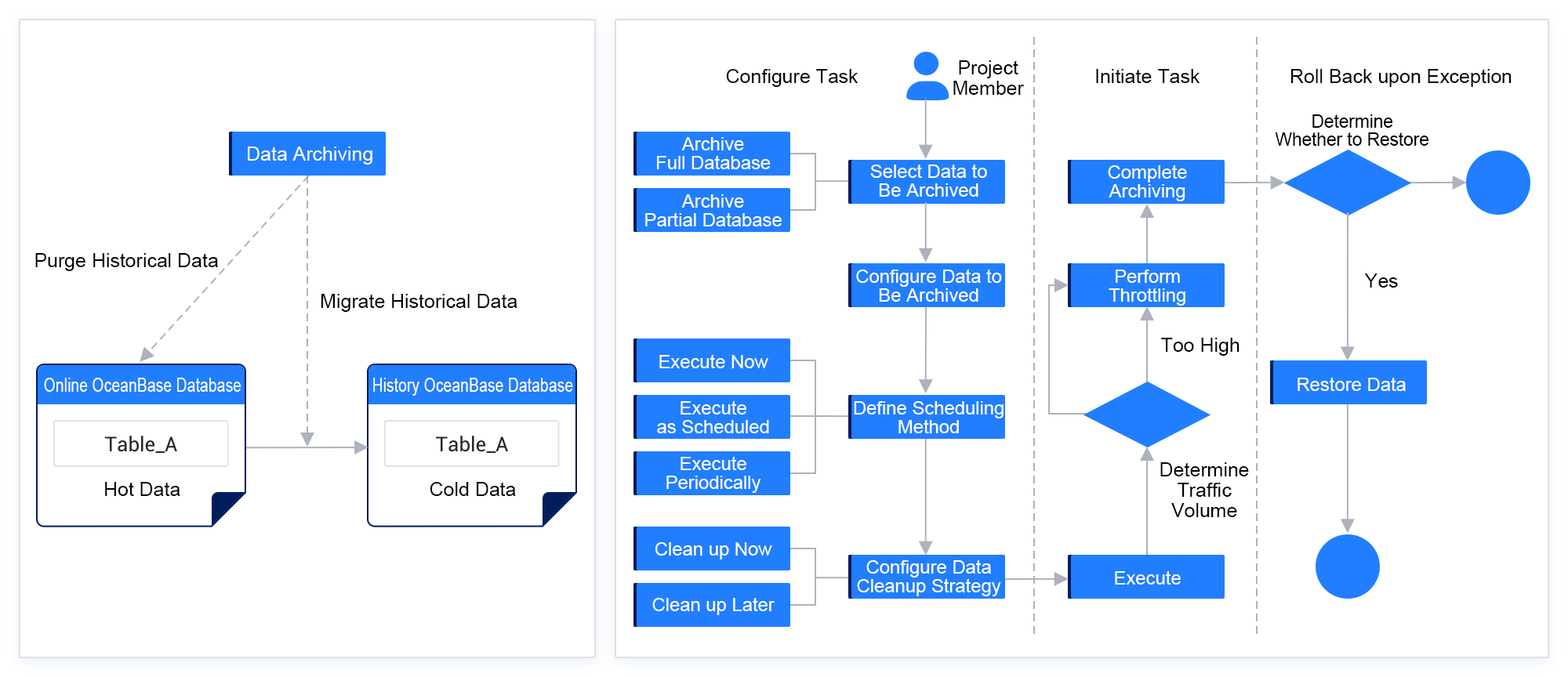
<style>
.page{position:relative;width:1568px;height:677px;background:#ffffff}
.page>*{position:absolute;margin:0}
.t1{font:19.5px/20.4px "ArialMT";color:#000000}
.t2{font:19.5px "ArialMT";color:#000000}
.t3{font:17.7px/18.5px "ArialMT";color:#000000}
.t4{font:18.7px/18.7px "ArialMT";color:#ffffff}
.t5{font:19.5px "ArialMT";color:#ffffff}
.t6{font:18.7px "ArialMT";color:#ffffff}
.t7{font:19.5px "ArialMT";color:#ffffff;scale:0.78 1}
</style>
<div class="page">
<p class="t1" style="left:953px;top:60px;width:71px;height:35px;text-align:center">Project<br>Member</p>
<p class="t2" style="left:726px;top:69px;width:132px;height:18px">Configure Task</p>
<p class="t2" style="left:1096px;top:69px;width:104px;height:14px">Initiate Task</p>
<p class="t2" style="left:1291px;top:69px;width:221px;height:18px">Roll Back upon Exception</p>
<p class="t3" style="left:1275px;top:114px;width:154px;height:32px;text-align:center">Determine<br>Whether to Restore</p>
<p class="t4" style="left:657px;top:137px;width:114px;height:32px;text-align:center">Archive<br>Full Database</p>
<p class="t5" style="left:248px;top:147px;width:124px;height:18px">Data Archiving</p>
<p class="t4" style="left:870px;top:164px;width:117px;height:33px;text-align:center">Select Data to<br>Be Archived</p>
<p class="t4" style="left:1108px;top:165px;width:79px;height:36px;text-align:center">Complete<br>Archiving</p>
<p class="t4" style="left:645px;top:194px;width:137px;height:33px;text-align:center">Archive<br>Partial Database</p>
<p class="t2" style="left:35px;top:253px;width:183px;height:18px">Purge Historical Data</p>
<p class="t4" style="left:856px;top:269px;width:146px;height:33px;text-align:center">Configure Data to<br>Be Archived</p>
<p class="t4" style="left:1109px;top:270px;width:76px;height:36px;text-align:center">Perform<br>Throttling</p>
<p class="t2" style="left:1364px;top:274px;width:34px;height:14px">Yes</p>
<p class="t2" style="left:321px;top:294px;width:196px;height:18px">Migrate Historical Data</p>
<p class="t2" style="left:1161px;top:338px;width:79px;height:18px">Too High</p>
<p class="t6" style="left:659px;top:354px;width:109px;height:14px">Execute Now</p>
<p class="t7" style="left:44px;top:378px;width:197px;height:14px">Online OceanBase Database</p>
<p class="t7" style="left:373px;top:378px;width:200px;height:18px">History OceanBase Database</p>
<p class="t6" style="left:1298px;top:377px;width:108px;height:14px">Restore Data</p>
<p class="t4" style="left:657px;top:401px;width:112px;height:33px;text-align:center">Execute<br>as Scheduled</p>
<p class="t4" style="left:854px;top:401px;width:150px;height:33px;text-align:center">Define Scheduling<br>Method</p>
<p class="t4" style="left:666px;top:456px;width:95px;height:37px;text-align:center">Execute<br>Periodically</p>
<p class="t1" style="left:1160px;top:463px;width:89px;height:54px;text-align:center">Determine<br>Traffic<br>Volume</p>
<p class="t2" style="left:105px;top:482px;width:75px;height:14px">Hot Data</p>
<p class="t2" style="left:430px;top:482px;width:86px;height:14px">Cold Data</p>
<p class="t6" style="left:655px;top:543px;width:117px;height:17px">Clean up Now</p>
<p class="t4" style="left:857px;top:560px;width:144px;height:37px;text-align:center">Configure Data<br>Cleanup Strategy</p>
<p class="t6" style="left:1115px;top:571px;width:66px;height:14px">Execute</p>
<p class="t6" style="left:652px;top:597px;width:123px;height:18px">Clean up Later</p>
</div>
